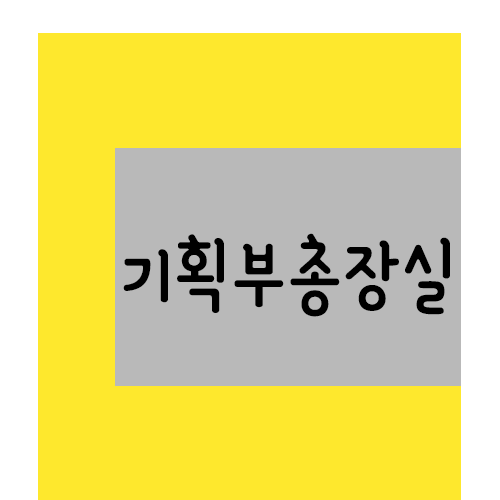
<style>
.page{position:relative;width:500px;height:500px;background:#fee82d}
.page>*{position:absolute;margin:0}
.t1{font:90px "YanoljaYacheR";color:#000000}
</style>
<div class="page">
<p class="t1" style="left:123px;top:233px;width:327px;height:84px">기획부총장실</p>
</div>
